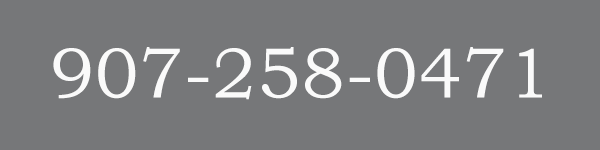
<style>
.page{position:relative;width:600px;height:150px;background:#767779}
.page>*{position:absolute;margin:0}
.t1{font:71.6px "BookmanOldStyle";color:#fafafa}
</style>
<div class="page">
<p class="t1" style="left:53px;top:47px;width:489px;height:53px">907-258-0471</p>
</div>
